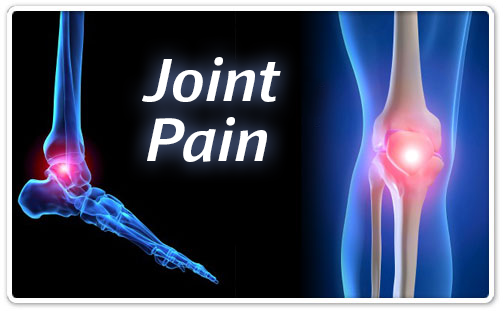
<style>
.page{position:relative;width:503px;height:311px;background:#000000}
.page>*{position:absolute;margin:0}
.t1{font:60px/60px "Impara-MediumItalic";letter-spacing:0.025em;color:#ffffff}
</style>
<div class="page">
<p class="t1" style="left:142px;top:57px;width:139px;height:105px">Joint Pain</p>
</div>
